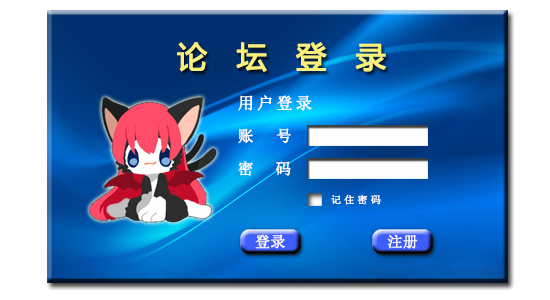
<style>
.page{position:relative;width:550px;height:300px}
.page>*{position:absolute;margin:0}
.t1{font:30px "MicrosoftYaHei";letter-spacing:0.96em;color:#f8f07b;font-weight:bold}
.t2{font:16px "SimSun";letter-spacing:0.18em;color:#fefefe;font-weight:bold}
.t3{font:15.6px/32.8px "SimSun";letter-spacing:0.12em;color:#fefefe;font-weight:bold}
.t4{font:15.6px/32.8px "SimSun";letter-spacing:0.46em;color:#fefefe;font-weight:bold}
.t5{font:10px "SimSun";letter-spacing:0.3em;color:#fefefe;font-weight:bold}
.t6{font:15px "SimSun";color:#fbf7f7;font-weight:bold}
</style>
<div class="page">
<p class="t1" style="left:177px;top:42px;width:209px;height:30px">论坛登录</p>
<p class="t2" style="left:238px;top:95px;width:74px;height:16px">用户登录</p>
<p class="t3" style="left:238px;top:128px;width:53px;height:48px"><span class="t4">账 号<br></span>密  码</p>
<p class="t5" style="left:331px;top:194px;width:50px;height:11px">记住密码</p>
<p class="t6" style="left:255px;top:234px;width:30px;height:15px">登录</p>
<p class="t6" style="left:387px;top:234px;width:31px;height:15px">注册</p>
</div>
